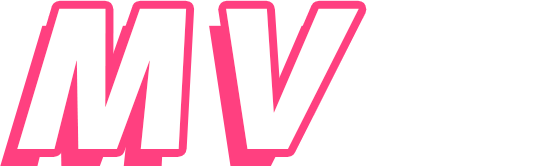
<style>
.page{position:relative;width:551px;height:166px;background:#ffffff}
.page>*{position:absolute;margin:0}
.t1{font:192px "mplus-2p-black";letter-spacing:0.1em;color:#ffffff;font-style:italic}
</style>
<div class="page">
<p class="t1" style="left:17px;top:8px;width:342px;height:141px">MV</p>
</div>
